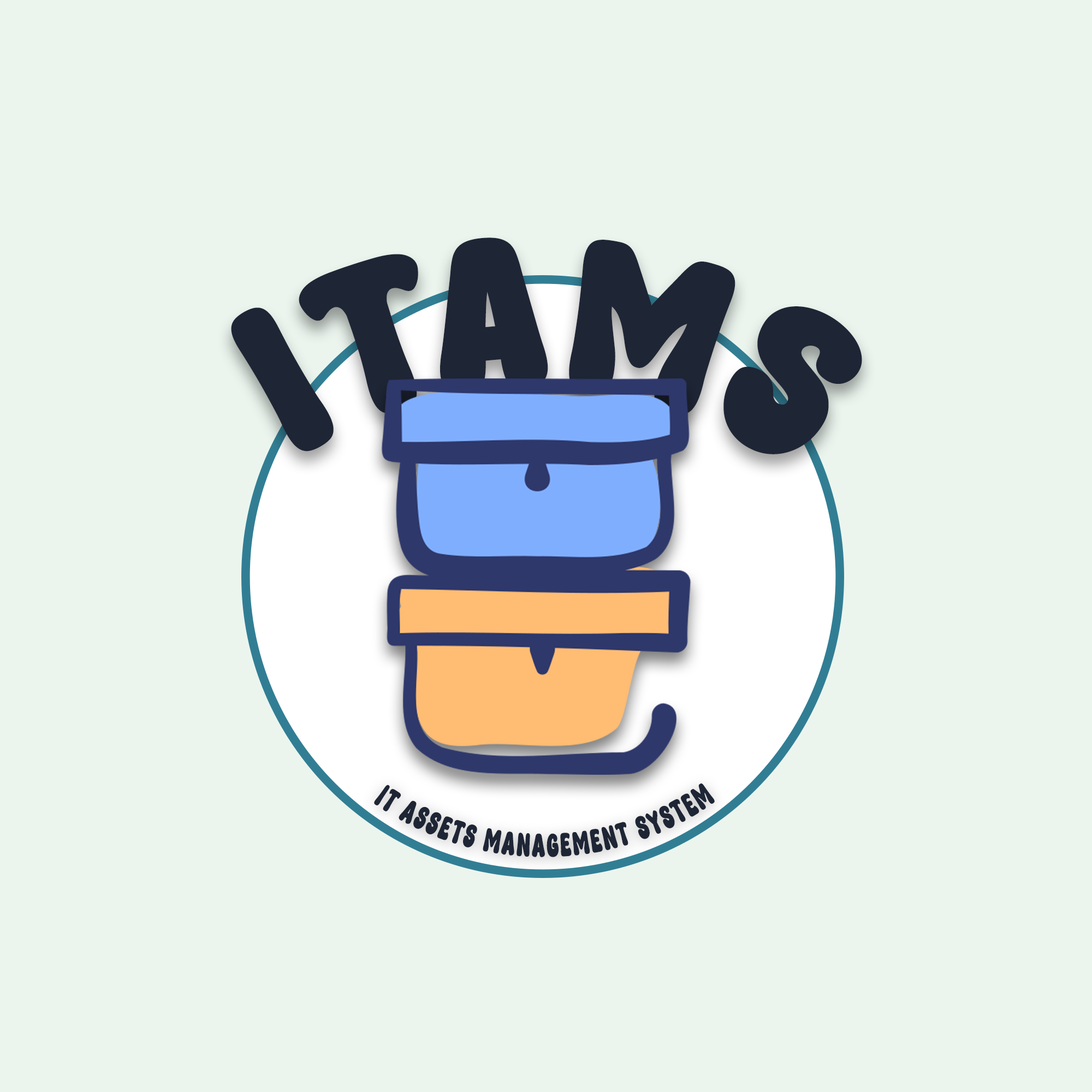
<style>
.page{position:relative;width:1092px;height:1092px;background:#ebf5ee}
.page>*{position:absolute;margin:0}
.t1{font:209.3px "MilkywayDEMO";letter-spacing:0.105em;color:#1e2535;scale:0.68 1}
.t2{font:31.8px/59.1px "MilkywayDEMO";letter-spacing:0.105em;color:#1e2535;scale:0.68 1}
</style>
<div class="page">
<p class="t1" style="left:231px;top:238px;width:631px;height:216px;rotate:3deg">ITAMS</p>
<p class="t2" style="left:374px;top:783px;width:341px;height:74px">IT ASSETS MANAGEMENT SYSTEM</p>
</div>
